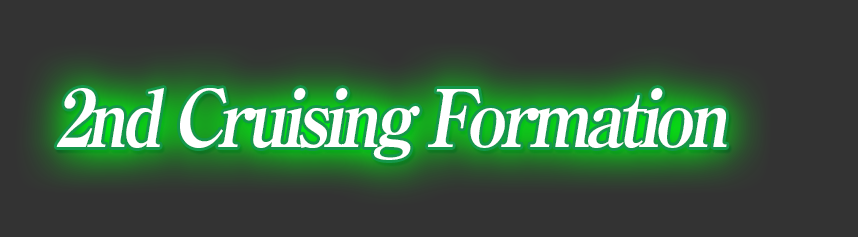
<style>
.page{position:relative;width:858px;height:237px;background:#333333}
.page>*{position:absolute;margin:0}
.t1{font:80px "RyuminPro-ExBold";letter-spacing:-0.08em;color:#ffffff;font-style:italic;scale:0.9 1}
</style>
<div class="page">
<p class="t1" style="left:56px;top:88px;width:671px;height:72px">2nd Cruising Formation</p>
</div>
